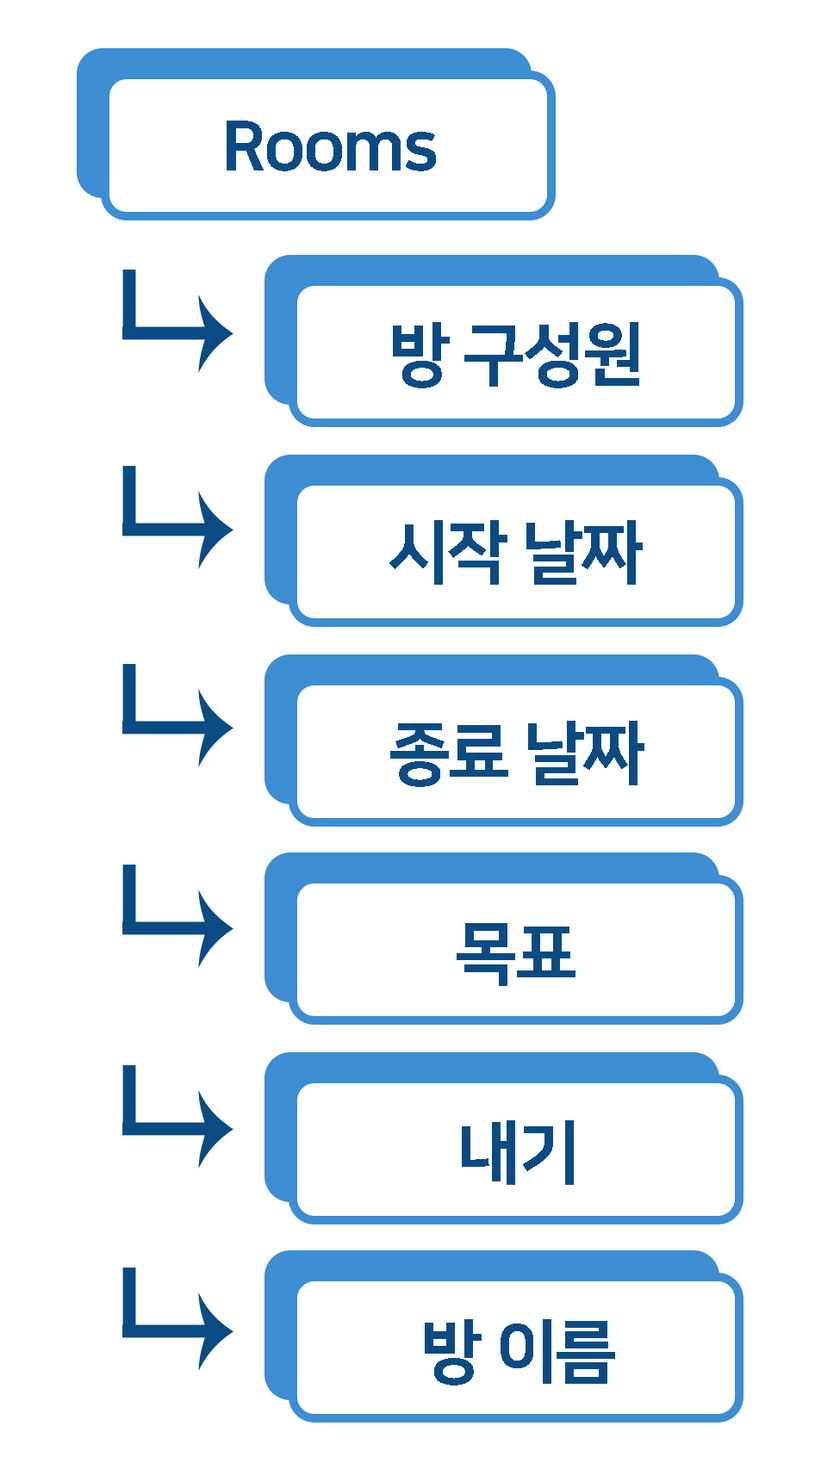
<style>
.page{position:relative;width:815px;height:1463px;background:#ffffff}
.page>*{position:absolute;margin:0}
.t1{font:68.9px "NanumSquareEB";letter-spacing:-0.04em;color:#0a4b84}
</style>
<div class="page">
<p class="t1" style="left:227px;top:121px;width:209px;height:50px">Rooms</p>
<p class="t1" style="left:393px;top:322px;width:246px;height:66px">방 구성원</p>
<p class="t1" style="left:389px;top:520px;width:254px;height:65px">시작 날짜</p>
<p class="t1" style="left:390px;top:721px;width:254px;height:66px">종료 날짜</p>
<p class="t1" style="left:457px;top:923px;width:118px;height:63px">목표</p>
<p class="t1" style="left:462px;top:1121px;width:112px;height:64px">내기</p>
<p class="t1" style="left:425px;top:1320px;width:190px;height:66px">방 이름</p>
</div>
